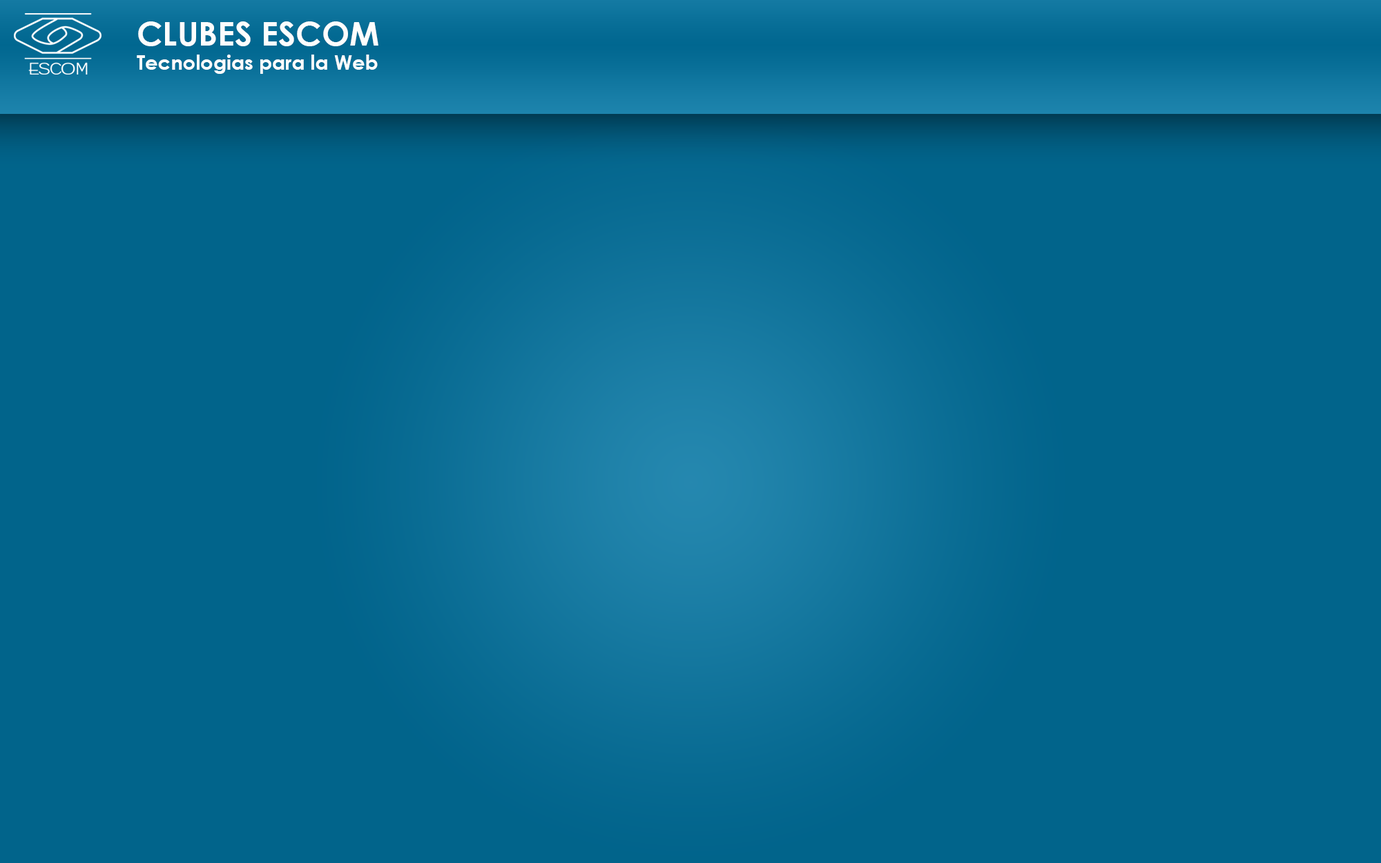
<style>
.page{position:relative;width:1381px;height:863px;background:#01648b}
.page>*{position:absolute;margin:0}
.t1{font:20px "CenturyGothic-Bold";color:#fdfdfd}
.t2{font:33.2px "CenturyGothic-Bold";color:#fdfdfd}
</style>
<div class="page">
<p class="t1" style="left:137px;top:21px;width:241px;height:53px"><span class="t2">CLUBES ESCOM<br></span>Tecnologias para la Web</p>
</div>
